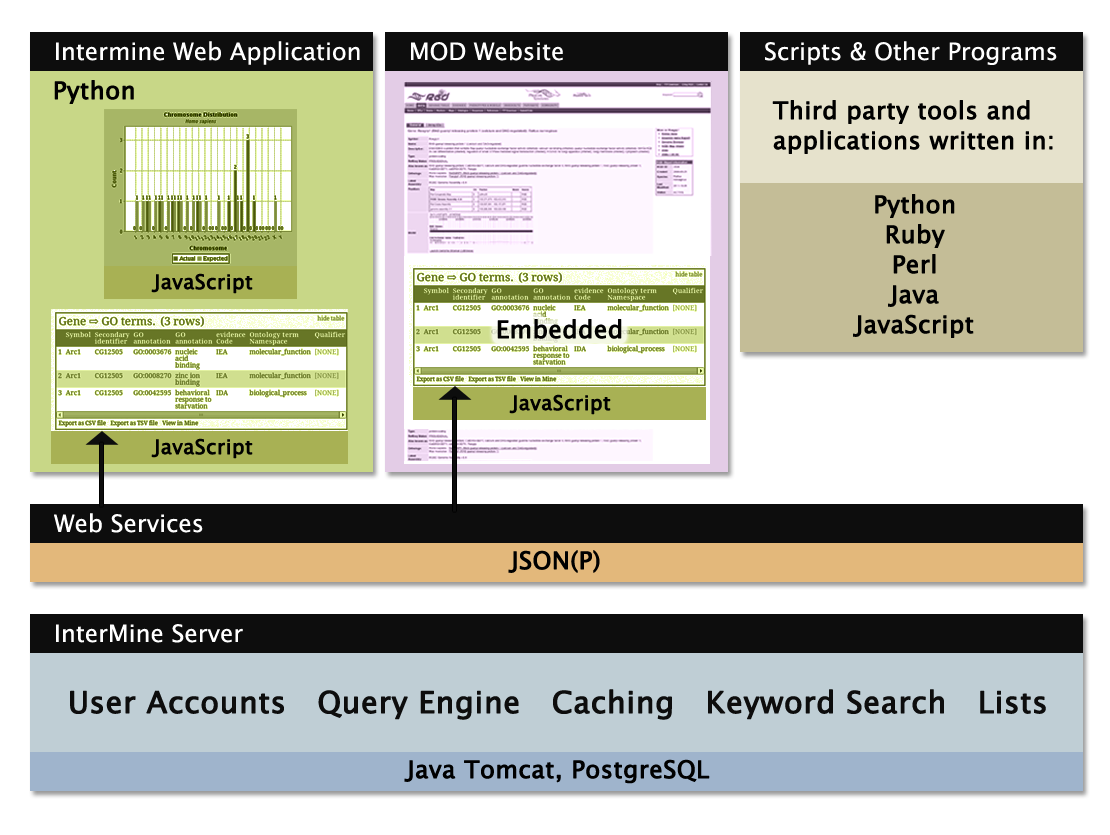
<style>
.page{position:relative;width:1110px;height:835px;background:#ffffff}
.page>*{position:absolute;margin:0}
.t1{font:24px "LucidaGrande";color:#ffffff}
.t2{font:24px "LucidaGrande";color:#000000;font-weight:bold}
.t3{font:24px/30px "LucidaGrande";color:#000000;font-weight:bold}
.t4{font:20px "LucidaGrande";color:#000000;font-weight:bold}
.t5{font:30px "LucidaGrande";color:#0d0d0d;font-weight:bold}
</style>
<div class="page">
<p class="t1" style="left:56px;top:41px;width:304px;height:24px">Intermine Web Application</p>
<p class="t1" style="left:411px;top:41px;width:152px;height:20px">MOD Website</p>
<p class="t1" style="left:765px;top:41px;width:292px;height:24px">Scripts &amp; Other Programs</p>
<p class="t2" style="left:54px;top:80px;width:80px;height:24px">Python</p>
<p class="t3" style="left:772px;top:100px;width:281px;height:54px">Third party tools and<br>applications written in:</p>
<p class="t3" style="left:853px;top:194px;width:121px;height:144px;text-align:center">Python<br>Ruby<br>Perl<br>Java<br>JavaScript</p>
<p class="t4" style="left:151px;top:273px;width:102px;height:21px">JavaScript</p>
<p class="t2" style="left:497px;top:319px;width:125px;height:20px">Embedded</p>
<p class="t4" style="left:509px;top:394px;width:102px;height:21px">JavaScript</p>
<p class="t4" style="left:151px;top:438px;width:102px;height:21px">JavaScript</p>
<p class="t1" style="left:54px;top:513px;width:149px;height:20px">Web Services</p>
<p class="t2" style="left:508px;top:550px;width:92px;height:23px">JSON(P)</p>
<p class="t1" style="left:56px;top:624px;width:187px;height:19px">InterMine Server</p>
<p class="t5" style="left:70px;top:689px;width:976px;height:31px">User Accounts   Query Engine   Caching   Keyword Search   Lists</p>
<p class="t2" style="left:404px;top:759px;width:306px;height:25px">Java Tomcat, PostgreSQL</p>
</div>
